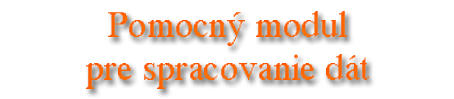
<style>
.page{position:relative;width:454px;height:99px;background:#ffffff}
.page>*{position:absolute;margin:0}
.t1{font:36px "MS Serif";color:#ff6300}
</style>
<div class="page">
<p class="t1" style="left:86px;top:11px;width:283px;height:78px;text-align:center">Pomocný modul<br>pre spracovanie dát</p>
</div>
